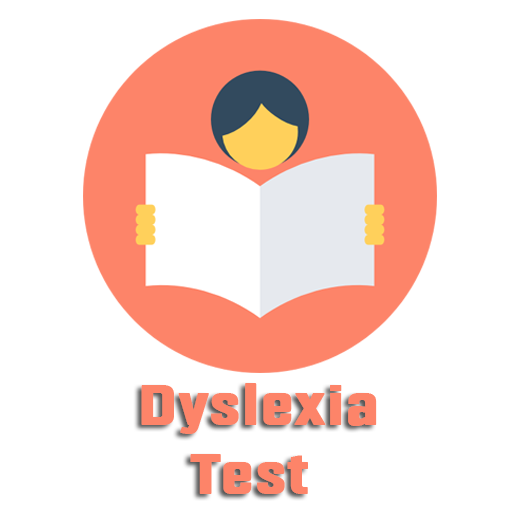
<style>
.page{position:relative;width:512px;height:512px;background:#ffffff}
.page>*{position:absolute;margin:0}
.t1{font:57.1px "Fragua-Bold";color:#fd8469;font-weight:bold;scale:1.17 1}
</style>
<div class="page">
<p class="t1" style="left:141px;top:383px;width:236px;height:111px;text-align:center">Dyslexia <br>Test</p>
</div>
